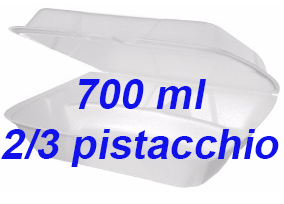
<style>
.page{position:relative;width:284px;height:204px;background:#fefefe}
.page>*{position:absolute;margin:0}
.t1{font:72px "Arial-BoldMT";color:#1111ea;font-style:italic}
</style>
<div class="page">
<p class="t1" style="left:78px;top:79px;width:128px;height:30px">700 ml</p>
<p class="t1" style="left:1px;top:129px;width:278px;height:38px">2/3 pistacchio</p>
</div>
